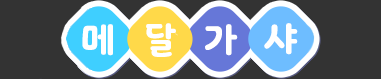
<style>
.page{position:relative;width:381px;height:79px;background:#333333}
.page>*{position:absolute;margin:0}
.t1{font:37.3px "Binggrae-Bold";letter-spacing:0.05em;color:#ffffff;text-transform:uppercase;scale:0.95 1}
.t2{font:34.7px "Binggrae-Bold";letter-spacing:0.05em;color:#ffffff;text-transform:uppercase;scale:0.95 1}
</style>
<div class="page">
<p class="t1" style="left:82px;top:24px;width:31px;height:32px">메</p>
<p class="t2" style="left:146px;top:23px;width:30px;height:34px">달</p>
<p class="t1" style="left:205px;top:24px;width:33px;height:32px">가</p>
<p class="t1" style="left:264px;top:23px;width:34px;height:32px">샤</p>
</div>
